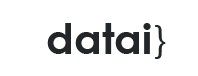
<style>
.page{position:relative;width:198px;height:76px;background:#ffffff}
.page>*{position:absolute;margin:0}
.t1{font:42px "CenturyGothic-Bold";color:#222629}
.t2{font:36px "CenturyGothic";color:#222629}
</style>
<div class="page">
<p class="t1" style="left:47px;top:23px;width:104px;height:31px">datai</p>
<p class="t2" style="left:155px;top:25px;width:11px;height:34px">}</p>
</div>
